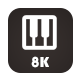
<style>
.page{position:relative;width:80px;height:80px;background:#ffffff}
.page>*{position:absolute;margin:0}
.t1{font:15px "Bauhaus93";color:#ffffff}
</style>
<div class="page">
<p class="t1" style="left:31px;top:56px;width:18px;height:12px">8K</p>
</div>
